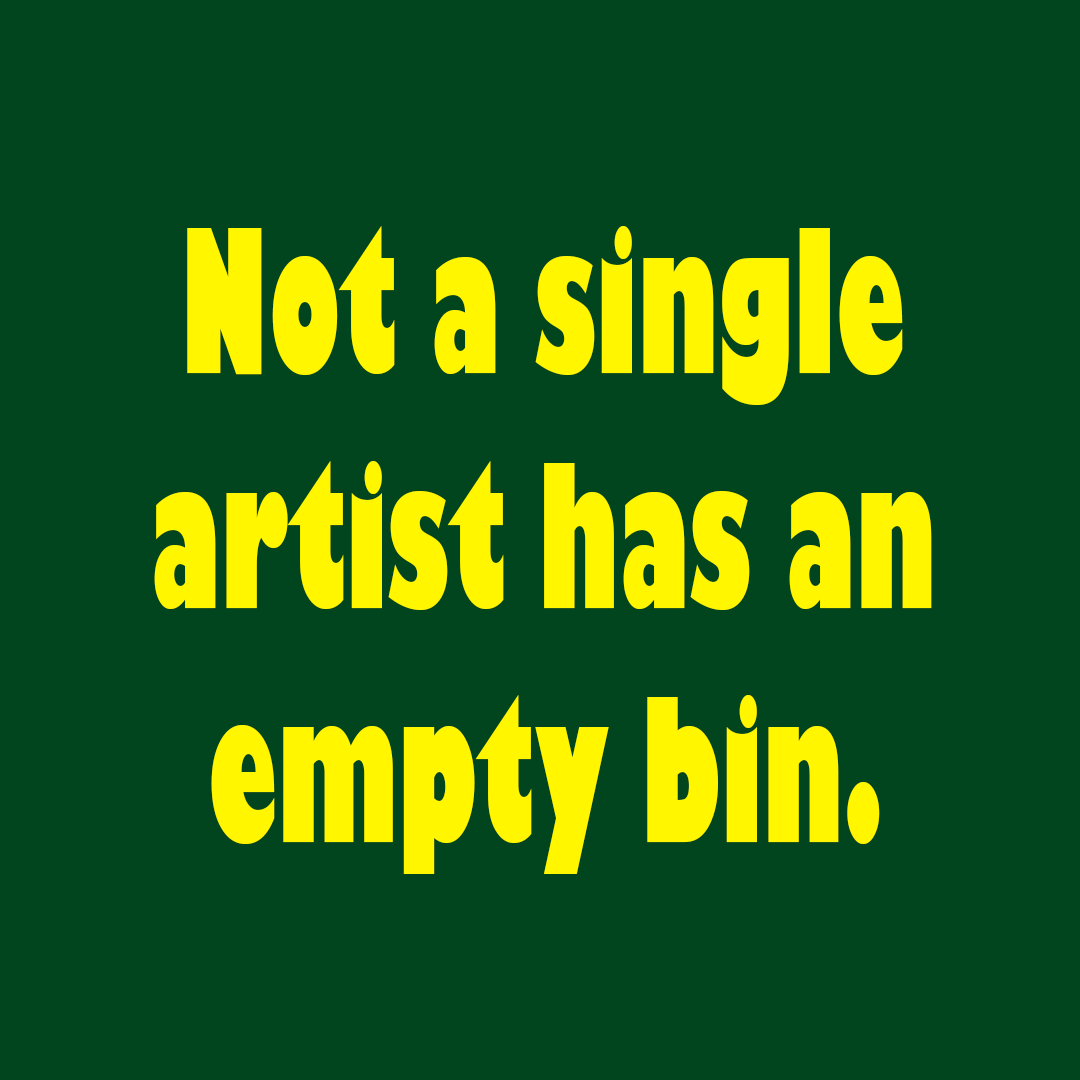
<style>
.page{position:relative;width:1080px;height:1080px;background:#00451d}
.page>*{position:absolute;margin:0}
.t1{font:195.1px "GillSans-UltraBold";color:#fff600;scale:0.51 1}
</style>
<div class="page">
<p class="t1" style="left:154px;top:226px;width:778px;height:648px;text-align:center">Not a single artist has an empty bin.</p>
</div>
